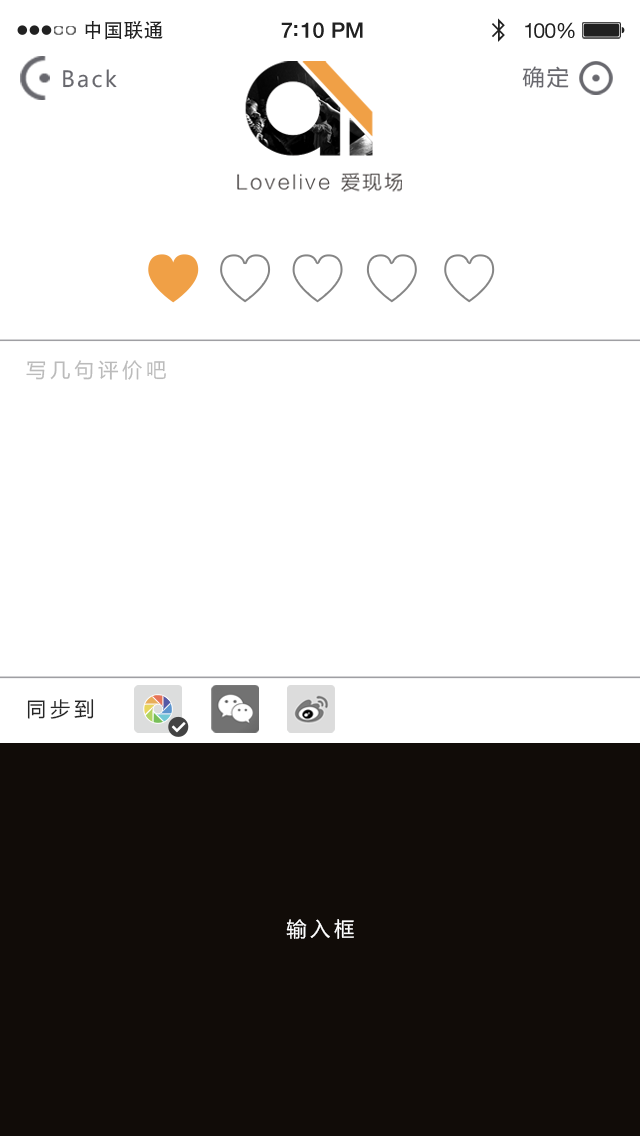
<style>
.page{position:relative;width:640px;height:1136px;background:#ffffff}
.page>*{position:absolute;margin:0}
.t1{font:19.8px "AdobeHeitiStd-Regular";letter-spacing:0.02em;color:#212121}
.t2{font:21.5px "HelveticaNeue-Medium";letter-spacing:-0.02em;color:#212121}
.t3{font:20.6px "HelveticaNeue";letter-spacing:-0.02em;color:#212121}
.t4{font:22px "MicrosoftYaHei";letter-spacing:0.1em;color:#68686e}
.t5{font:20px "MicrosoftYaHei";letter-spacing:0.2em;color:#bbbbbb}
.t6{font:20px "MicrosoftYaHei";letter-spacing:0.2em;color:#262626}
.t7{font:20px "MicrosoftYaHei";letter-spacing:0.2em;color:#ffffff}
</style>
<div class="page">
<p class="t1" style="left:85px;top:20px;width:78px;height:20px">中国联通</p>
<p class="t2" style="left:281px;top:22px;width:82px;height:16px">7:10 PM</p>
<p class="t3" style="left:525px;top:22px;width:50px;height:17px">100%</p>
<p class="t4" style="left:63px;top:69px;width:54px;height:19px">Back</p>
<p class="t4" style="left:522px;top:66px;width:47px;height:22px">确定</p>
<p class="t5" style="left:26px;top:360px;width:140px;height:20px">写几句评价吧</p>
<p class="t6" style="left:27px;top:699px;width:67px;height:20px">同步到</p>
<p class="t7" style="left:286px;top:919px;width:68px;height:20px">输入框</p>
</div>
